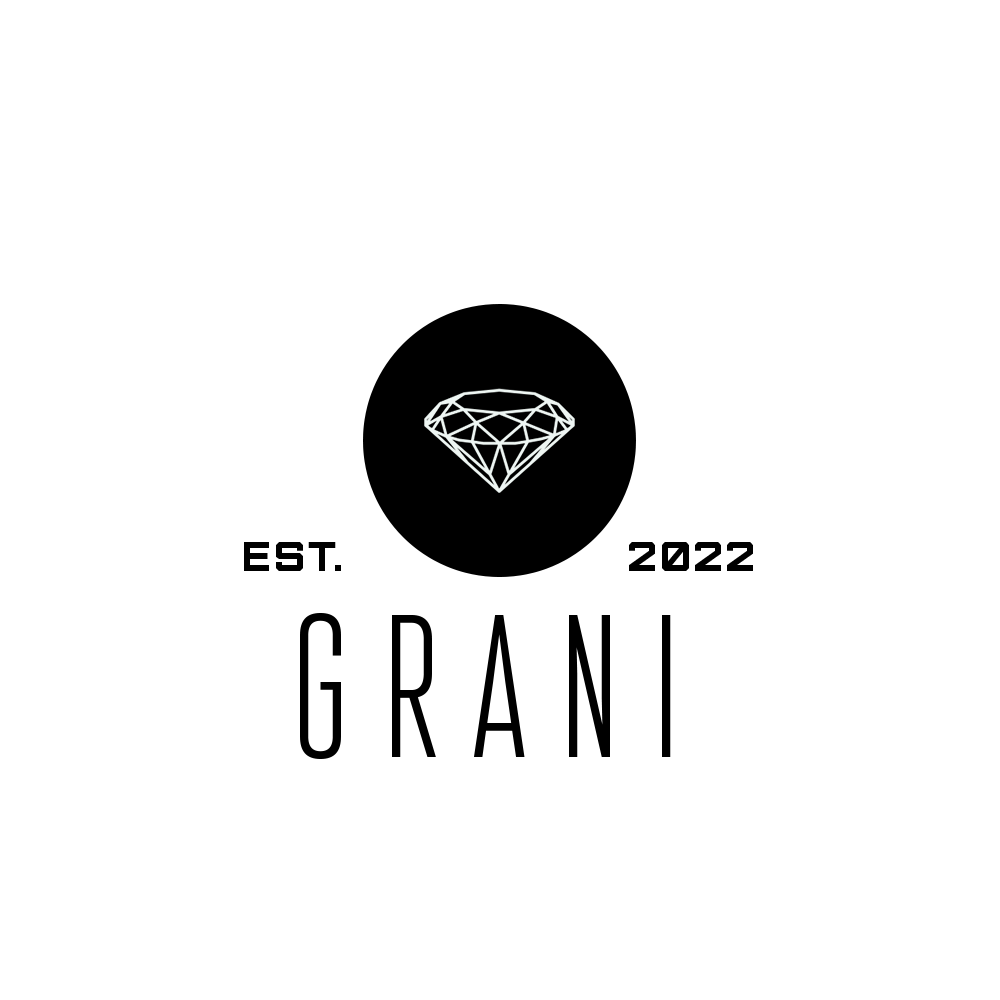
<style>
.page{position:relative;width:1000px;height:1000px;background:#ffffff}
.page>*{position:absolute;margin:0}
.t1{font:42px "Furore";letter-spacing:0.08em;color:#000000}
.t2{font:203.3px "Attentica4F-UltraLight";letter-spacing:0.18em;color:#000000}
</style>
<div class="page">
<p class="t1" style="left:244px;top:542px;width:509px;height:29px">EST.              2022</p>
<p class="t2" style="left:300px;top:613px;width:371px;height:146px">GRANI</p>
</div>
